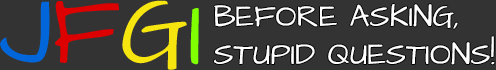
<style>
.page{position:relative;width:496px;height:70px;background:#333333}
.page>*{position:absolute;margin:0}
.t1{font:98.6px "ArchitectsDaughter-Regular";color:#0066d9}
.t2{font:98.6px "ArchitectsDaughter-Regular";color:#dc0000}
.t3{font:98.6px "ArchitectsDaughter-Regular";color:#f7e510}
.t4{font:98.6px "ArchitectsDaughter-Regular";color:#80ff00}
.t5{font:31.1px "ArchitectsDaughter-Regular";color:#ffffff}
</style>
<div class="page">
<p class="t1" style="left:0px;top:0px;width:199px;height:70px;rotate:1deg">J<span class="t2">F</span><span class="t3">G</span><span class="t4">I</span></p>
<p class="t5" style="left:214px;top:4px;width:281px;height:61px">BEFORE ASKING, <br>STUPID QUESTIONS!</p>
</div>
